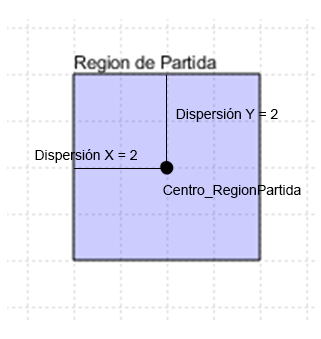
<style>
.page{position:relative;width:321px;height:339px;background:#ffffff}
.page>*{position:absolute;margin:0}
.t1{font:14px "ArialMT";color:#000000}
</style>
<div class="page">
<p class="t1" style="left:176px;top:108px;width:102px;height:14px">Dispersión Y = 2</p>
<p class="t1" style="left:35px;top:149px;width:102px;height:14px">Dispersión X = 2</p>
<p class="t1" style="left:163px;top:184px;width:138px;height:14px">Centro_RegionPartida</p>
</div>
